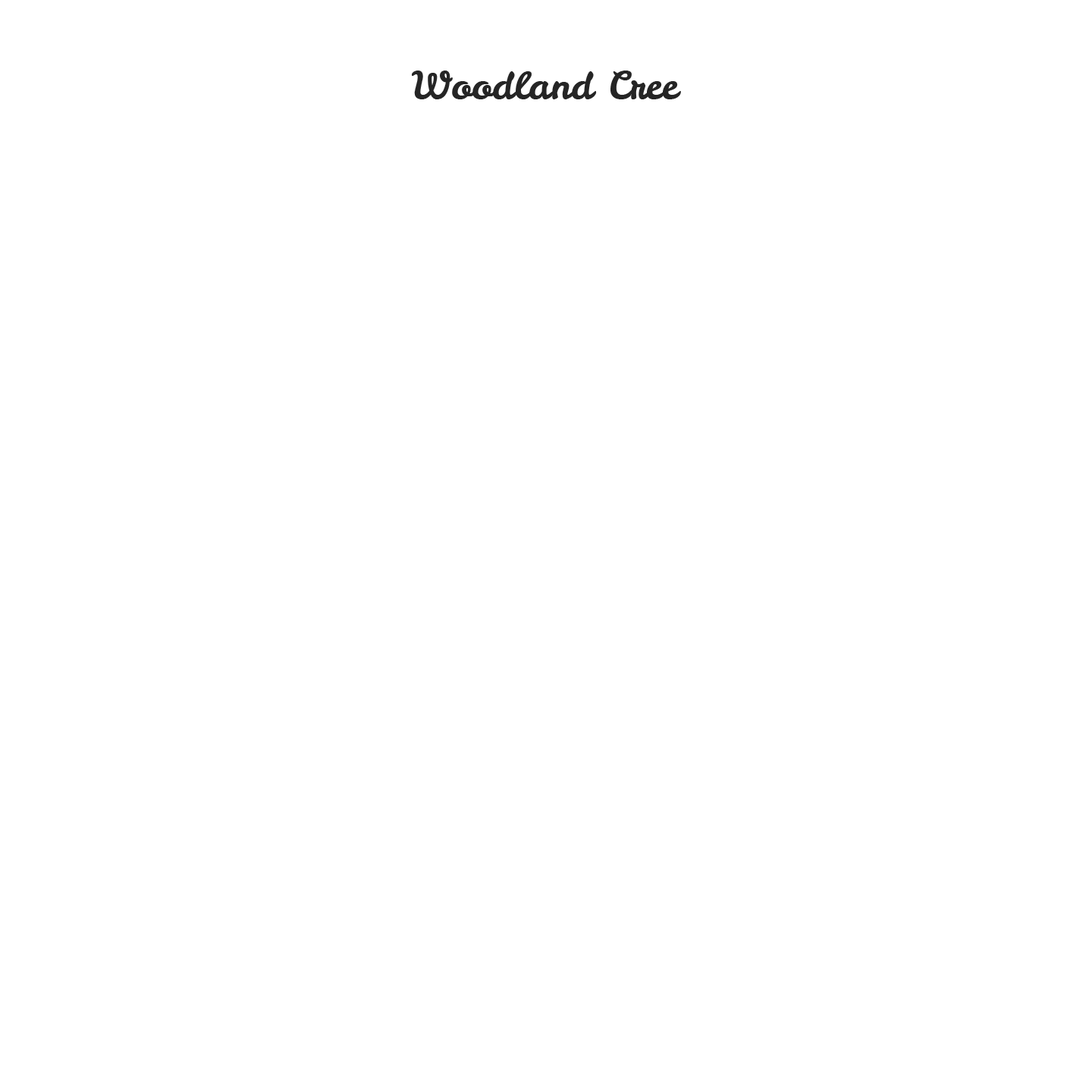
<style>
.page{position:relative;width:1092px;height:1092px;background:#ffffff}
.page>*{position:absolute;margin:0}
.t1{font:37.9px "LeckerliOne-Regular";color:#252525}
</style>
<div class="page">
<p class="t1" style="left:412px;top:71px;width:269px;height:28px">Woodland Cree</p>
</div>
